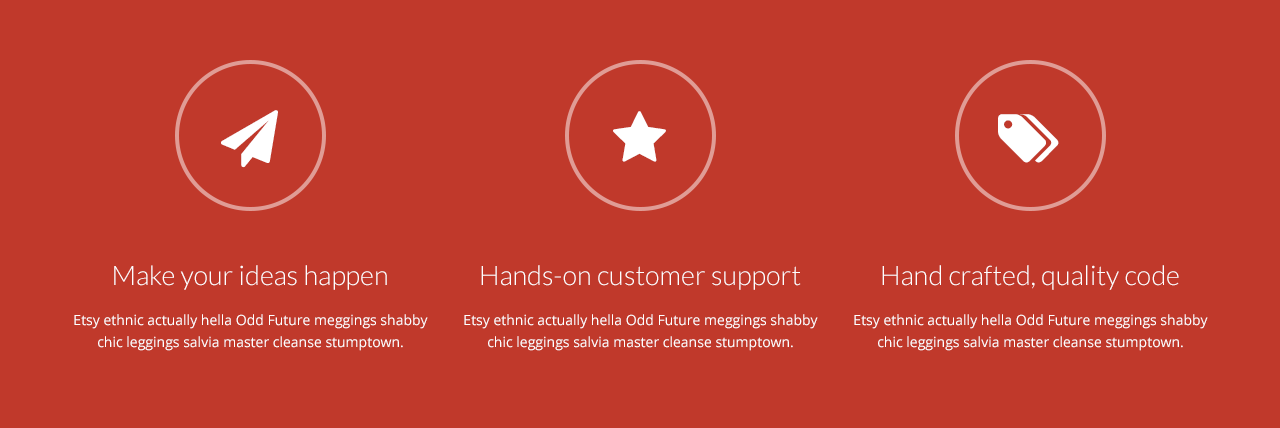
<style>
.page{position:relative;width:1280px;height:428px;background:#c0392b}
.page>*{position:absolute;margin:0}
.t1{font:27px "Lato-Light";color:#ffffff}
.t2{font:14px/22px "OpenSans";color:#ffffff}
</style>
<div class="page">
<p class="t1" style="left:114px;top:265px;width:273px;height:25px">Make your ideas happen</p>
<p class="t1" style="left:481px;top:265px;width:320px;height:25px">Hands-on customer support</p>
<p class="t1" style="left:882px;top:265px;width:297px;height:25px">Hand crafted, quality code</p>
<p class="t2" style="left:74px;top:314px;width:354px;height:37px;text-align:center">Etsy ethnic actually hella Odd Future meggings shabby chic leggings salvia master cleanse stumptown.</p>
<p class="t2" style="left:464px;top:314px;width:354px;height:37px;text-align:center">Etsy ethnic actually hella Odd Future meggings shabby chic leggings salvia master cleanse stumptown.</p>
<p class="t2" style="left:854px;top:314px;width:354px;height:37px;text-align:center">Etsy ethnic actually hella Odd Future meggings shabby chic leggings salvia master cleanse stumptown.</p>
</div>
